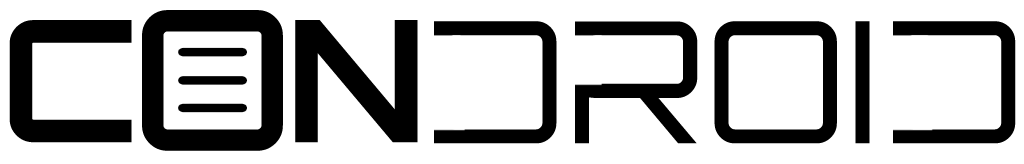
<style>
.page{position:relative;width:1024px;height:164px;background:#ffffff}
.page>*{position:absolute;margin:0}
.t1{font:195px "Orbitron-Medium";color:#000000;text-transform:uppercase}
.t2{font:169.3px "Orbitron-Bold";color:#000000}
.t3{font:169.3px "Orbitron-Regular";color:#000000}
</style>
<div class="page">
<p class="t1" style="left:142px;top:10px;width:141px;height:141px">o</p>
<p class="t2" style="left:9px;top:20px;width:409px;height:123px">C   N</p>
<p class="t3" style="left:434px;top:21px;width:582px;height:123px">DROID</p>
</div>
